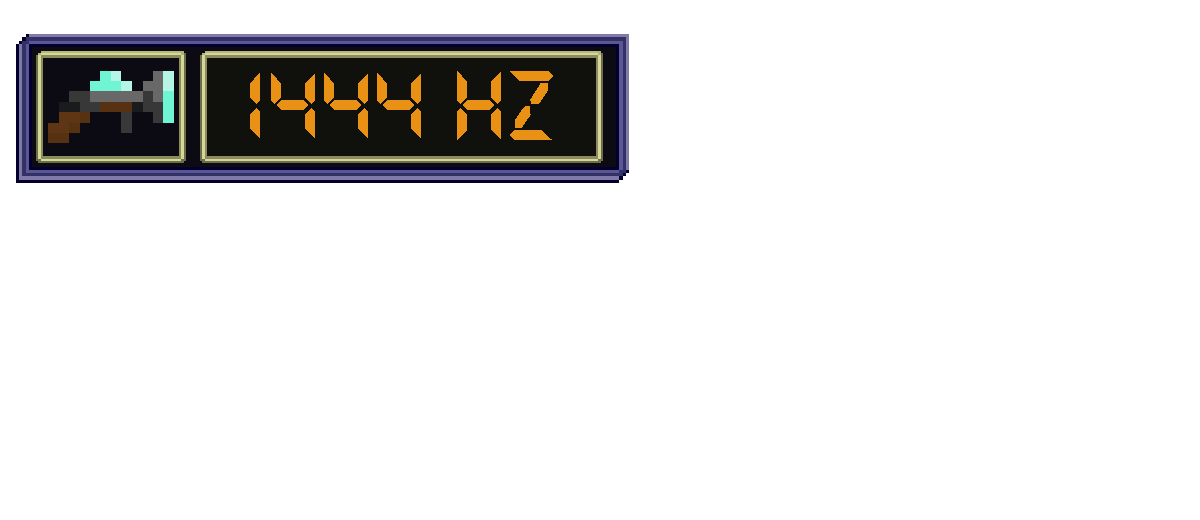
<style>
.page{position:relative;width:1200px;height:520px;background:#ffffff}
.page>*{position:absolute;margin:0}
.t1{font:108px "DS-Digital-Bold";color:#e99114}
</style>
<div class="page">
<p class="t1" style="left:250px;top:71px;width:303px;height:69px">1444 HZ</p>
</div>
